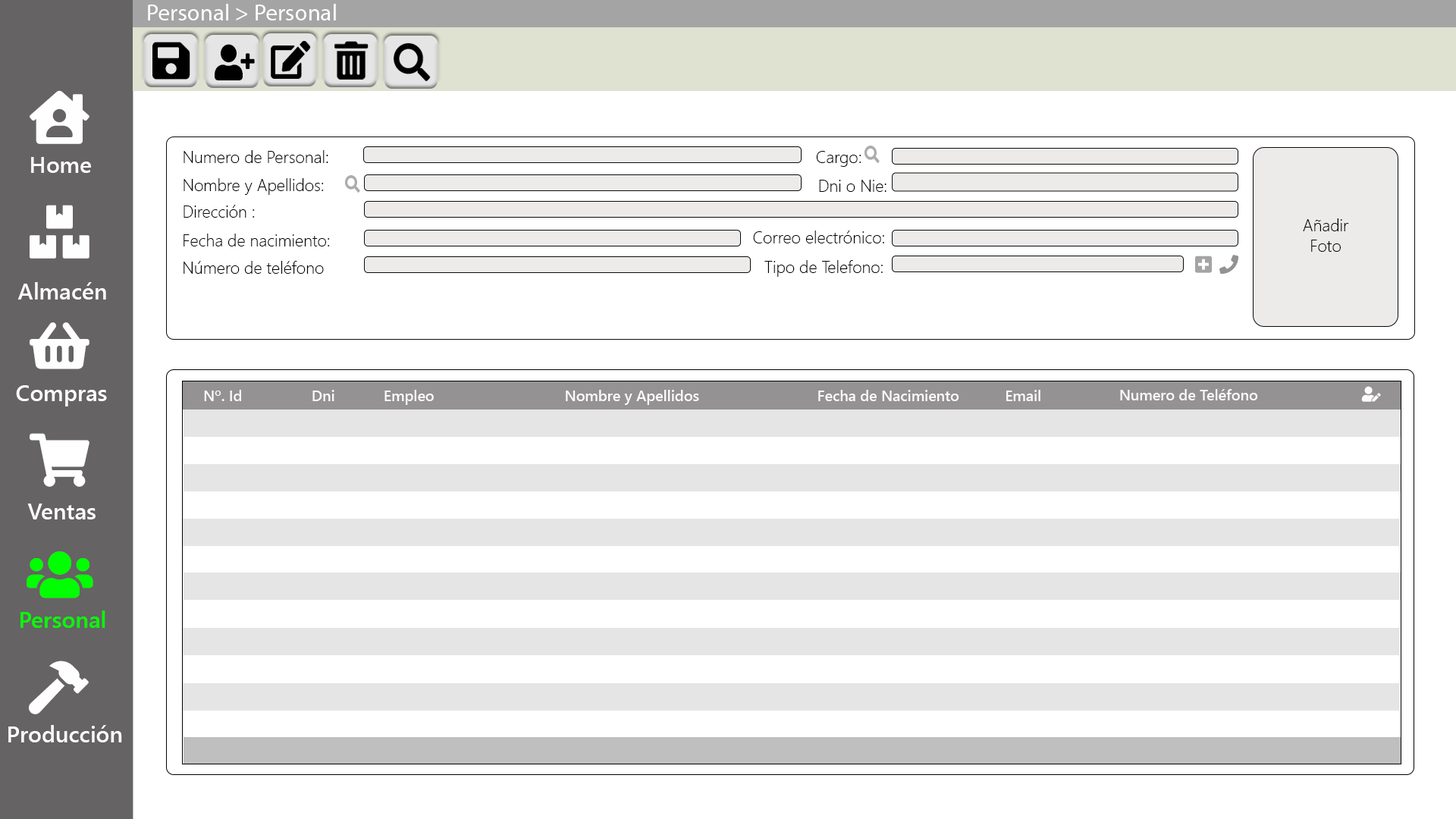
<style>
.page{position:relative;width:1456px;height:819px;background:#ffffff}
.page>*{position:absolute;margin:0}
.t1{font:23.5px "MyriadPro-Regular";color:#ffffff}
.t2{font:22.7px "SegoeUI-Semibold";color:#ffffff}
.t3{font:16.7px "SegoeUI-Light";color:#000000}
.t4{font:14.9px "SegoeUI-Semibold";color:#fbfbfb}
.t5{font:22.7px "SegoeUI-Semibold";color:#00ff00}
</style>
<div class="page">
<p class="t1" style="left:148px;top:4px;width:188px;height:16px">Personal &gt; Personal</p>
<p class="t2" style="left:31px;top:157px;width:60px;height:16px">Home</p>
<p class="t3" style="left:184px;top:150px;width:144px;height:13px">Numero de Personal:</p>
<p class="t3" style="left:816px;top:151px;width:45px;height:16px">Cargo:</p>
<p class="t3" style="left:184px;top:178px;width:140px;height:17px">Nombre y Apellidos:</p>
<p class="t3" style="left:819px;top:180px;width:67px;height:12px">Dni o Nie:</p>
<p class="t3" style="left:184px;top:205px;width:71px;height:13px">Dirección :</p>
<p class="t3" style="left:1303px;top:218px;width:46px;height:34px;text-align:center">Añadir<br>Foto</p>
<p class="t3" style="left:184px;top:234px;width:146px;height:12px">Fecha de nacimiento:</p>
<p class="t3" style="left:753px;top:231px;width:131px;height:12px">Correo electrónico:</p>
<p class="t3" style="left:184px;top:261px;width:140px;height:13px">Número de teléfono</p>
<p class="t3" style="left:764px;top:260px;width:119px;height:17px">Tipo de Telefono:</p>
<p class="t2" style="left:17px;top:282px;width:89px;height:18px">Almacén</p>
<p class="t2" style="left:16px;top:385px;width:91px;height:21px">Compras</p>
<p class="t4" style="left:204px;top:390px;width:37px;height:11px">Nº. Id</p>
<p class="t4" style="left:312px;top:390px;width:22px;height:11px">Dni</p>
<p class="t4" style="left:384px;top:390px;width:50px;height:15px">Empleo</p>
<p class="t4" style="left:566px;top:390px;width:133px;height:15px">Nombre y Apellidos</p>
<p class="t4" style="left:818px;top:390px;width:141px;height:11px">Fecha de Nacimiento</p>
<p class="t4" style="left:1006px;top:390px;width:34px;height:11px">Email</p>
<p class="t4" style="left:1120px;top:389px;width:138px;height:11px">Numero de Teléfono</p>
<p class="t2" style="left:27px;top:504px;width:69px;height:15px">Ventas</p>
<p class="t5" style="left:20px;top:610px;width:85px;height:18px">Personal</p>
<p class="t2" style="left:8px;top:725px;width:114px;height:17px">Producción</p>
</div>
